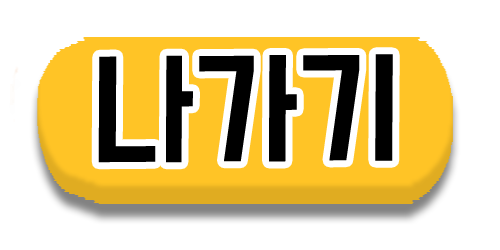
<style>
.page{position:relative;width:500px;height:250px;background:#ffffff}
.page>*{position:absolute;margin:0}
.t1{font:112.3px "BMDoHyeon";color:#000000;scale:0.96 1}
</style>
<div class="page">
<p class="t1" style="left:98px;top:54px;width:295px;height:109px">나가기</p>
</div>
